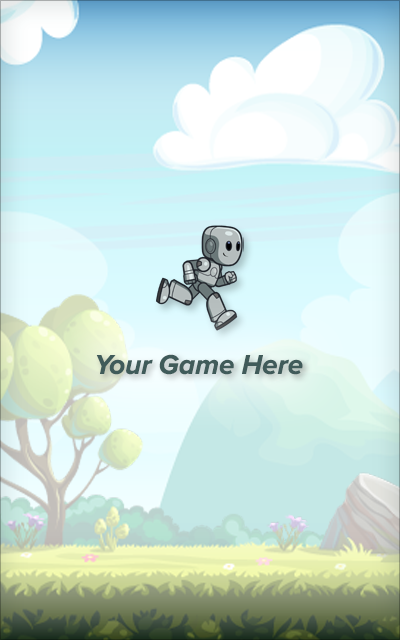
<style>
.page{position:relative;width:400px;height:640px}
.page>*{position:absolute;margin:0}
.t1{font:28px "ProximaNova-BoldIt";color:#405b5a}
</style>
<div class="page">
<p class="t1" style="left:96px;top:354px;width:207px;height:21px">Your Game Here</p>
</div>
